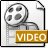
<style>
.page{position:relative;width:48px;height:48px}
.page>*{position:absolute;margin:0}
.t1{font:11px "EstrangeloEdessa";color:#ffffff}
</style>
<div class="page">
<p class="t1" style="left:16px;top:33px;width:30px;height:8px">VIDEO</p>
</div>
